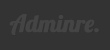
<style>
.page{position:relative;width:110px;height:50px;background:#333333}
.page>*{position:absolute;margin:0}
.t1{font:24px "Lobster1.4";letter-spacing:-0.02em;color:#444444;font-weight:bold}
</style>
<div class="page">
<p class="t1" style="left:9px;top:14px;width:90px;height:21px">Adminre.</p>
</div>
